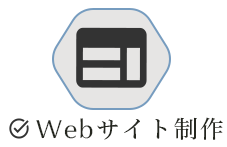
<style>
.page{position:relative;width:227px;height:147px;background:#ffffff}
.page>*{position:absolute;margin:0}
.t1{font:24px "HiraMinPro-W3";letter-spacing:0.08em;color:#25271f}
.t2{font:26px "Optima-Regular";letter-spacing:0.08em;color:#25271f}
</style>
<div class="page">
<p class="t1" style="left:36px;top:117px;width:187px;height:23px"><span class="t2">Web</span>サイト制作</p>
</div>
